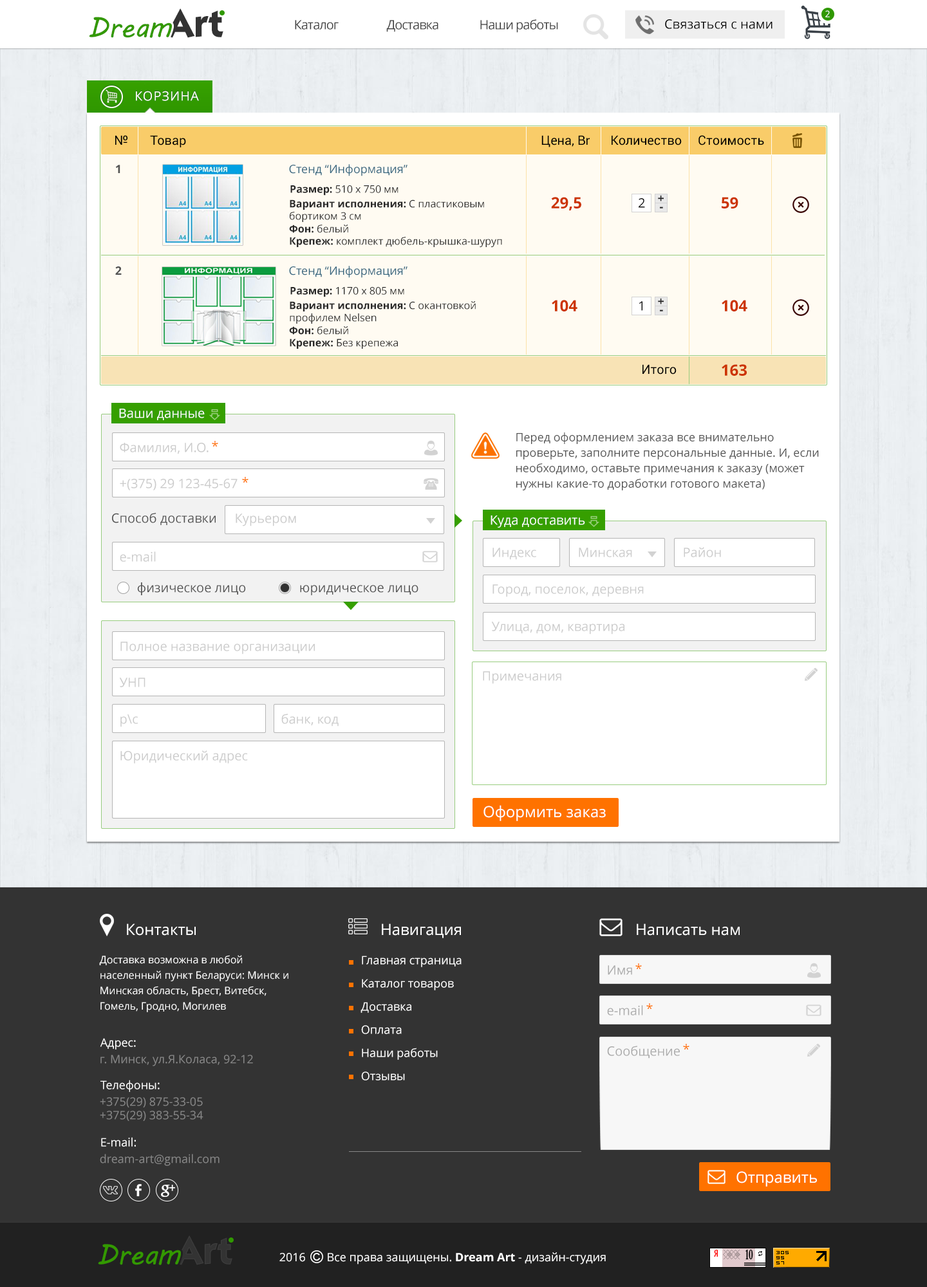
<style>
.page{position:relative;width:927px;height:1287px;background:#ffffff}
.page>*{position:absolute;margin:0}
.t1{font:29px "MVBoli";color:#339900}
.t2{font:29px "MVBoli";letter-spacing:-0.05em;color:#339900}
.t3{font:38.6px "KabelCTT-MediumBold";letter-spacing:0.01em;color:#333333}
.t4{font:9px "OpenSans";color:#ffffff}
.t5{font:12.9px "OpenSans";letter-spacing:-0.05em;color:#3f3f3f}
.t6{font:12.9px "OpenSans";color:#000000}
.t7{font:12.9px "OpenSans";letter-spacing:0.05em;color:#ffffff}
.t8{font:12.9px "Roboto-Regular";color:#000000}
.t9{font:11.6px "OpenSans-Bold";color:#525252}
.t10{font:11.6px "OpenSans";color:#33647e}
.t11{font:10.3px "OpenSans";color:#282828}
.t12{font:10.3px "OpenSans-Bold";color:#282828}
.t13{font:15.4px "OpenSans-Bold";color:#cc3300}
.t14{font:11.6px "OpenSans-Bold";letter-spacing:-0.01em;color:#282828}
.t15{font:12.9px "OpenSans";color:#ffffff}
.t16{font:11.6px/15.4px "OpenSans";color:#525252}
.t17{font:12.9px "OpenSans";color:#cbcbcb}
.t18{font:12.9px "OpenSans";color:#ff7200}
.t19{font:12.9px "OpenSans";color:#525252}
.t20{font:15.4px "OpenSans";color:#ffffff}
.t21{font:10.3px/15.4px "OpenSans";color:#ffffff}
.t22{font:11.6px/23.2px "OpenSans";color:#ffffff}
.t23{font:12.9px "OpenSans";color:#ababab}
.t24{font:11.6px "OpenSans";color:#ffffff}
.t25{font:11.6px "OpenSans";color:#878787}
.t26{font:11.6px "OpenSans-Bold";color:#ffffff}
</style>
<div class="page">
<p class="t1" style="left:89px;top:17px;width:83px;height:21px">Dre<span class="t2">am</span></p>
<p class="t3" style="left:165px;top:8px;width:58px;height:30px">Art</p>
<p class="t4" style="left:825px;top:10px;width:4px;height:7px">2</p>
<p class="t5" style="left:295px;top:19px;width:263px;height:14px">Каталог    Доставка  Наши работы</p>
<p class="t6" style="left:665px;top:19px;width:107px;height:10px">Связаться с нами</p>
<p class="t7" style="left:136px;top:91px;width:63px;height:10px">КОРЗИНА</p>
<p class="t8" style="left:115px;top:135px;width:649px;height:12px">№      Товар                   Цена, Br     Количество     Стоимость</p>
<p class="t9" style="left:116px;top:165px;width:4px;height:8px">1</p>
<p class="t10" style="left:289px;top:164px;width:118px;height:12px">Стенд “Информация”</p>
<p class="t11" style="left:290px;top:185px;width:108px;height:11px"><span class="t12">Размер:</span> 510 х 750 мм</p>
<p class="t13" style="left:551px;top:197px;width:30px;height:13px">29,5</p>
<p class="t14" style="left:658px;top:195px;width:5px;height:6px">+</p>
<p class="t13" style="left:721px;top:197px;width:17px;height:11px">59</p>
<p class="t11" style="left:290px;top:199px;width:194px;height:23px"><span class="t12">Вариант исполнения:</span> С пластиковым бортиком 3 см</p>
<p class="t6" style="left:638px;top:198px;width:7px;height:10px">2</p>
<p class="t14" style="left:660px;top:207px;width:3px;height:1px">-</p>
<p class="t11" style="left:289px;top:225px;width:59px;height:8px"><span class="t12">Фон:</span> белый</p>
<p class="t11" style="left:290px;top:237px;width:212px;height:10px"><span class="t12">Крепеж:</span> комплект дюбель-крышка-шуруп</p>
<p class="t9" style="left:115px;top:266px;width:7px;height:9px">2</p>
<p class="t10" style="left:289px;top:266px;width:118px;height:12px">Стенд “Информация”</p>
<p class="t11" style="left:290px;top:287px;width:114px;height:10px"><span class="t12">Размер:</span> 1170 х 805 мм</p>
<p class="t11" style="left:290px;top:301px;width:186px;height:23px"><span class="t12">Вариант исполнения:</span> С окантовкой профилем Nelsen</p>
<p class="t13" style="left:551px;top:300px;width:26px;height:11px">104</p>
<p class="t6" style="left:638px;top:301px;width:4px;height:10px">1</p>
<p class="t14" style="left:658px;top:298px;width:5px;height:6px">+</p>
<p class="t13" style="left:721px;top:300px;width:26px;height:11px">104</p>
<p class="t14" style="left:660px;top:310px;width:3px;height:1px">-</p>
<p class="t11" style="left:289px;top:326px;width:59px;height:9px"><span class="t12">Фон:</span> белый</p>
<p class="t11" style="left:290px;top:338px;width:108px;height:11px"><span class="t12">Крепеж:</span> Без крепежа</p>
<p class="t8" style="left:642px;top:364px;width:34px;height:10px">Итого</p>
<p class="t13" style="left:721px;top:364px;width:25px;height:12px">163</p>
<p class="t15" style="left:119px;top:409px;width:86px;height:11px">Ваши данные</p>
<p class="t16" style="left:516px;top:432px;width:302px;height:58px">Перед оформлением заказа все внимательно проверьте, заполните персональные данные. И, если необходимо, оставьте примечания к заказу (может нужны какие-то доработки готового макета)</p>
<p class="t17" style="left:120px;top:443px;width:88px;height:11px">Фамилия, И.О.</p>
<p class="t18" style="left:212px;top:441px;width:6px;height:6px">*</p>
<p class="t17" style="left:120px;top:479px;width:117px;height:11px">+(375) 29 123-45-67</p>
<p class="t18" style="left:242px;top:477px;width:6px;height:6px">*</p>
<p class="t19" style="left:112px;top:513px;width:104px;height:12px">Способ доставки</p>
<p class="t17" style="left:236px;top:513px;width:60px;height:13px">Курьером</p>
<p class="t15" style="left:490px;top:515px;width:95px;height:13px">Куда доставить</p>
<p class="t17" style="left:120px;top:551px;width:36px;height:11px">e-mail</p>
<p class="t17" style="left:492px;top:548px;width:44px;height:12px">Индекс</p>
<p class="t17" style="left:578px;top:548px;width:54px;height:9px">Минская</p>
<p class="t17" style="left:683px;top:547px;width:38px;height:10px">Район</p>
<p class="t19" style="left:137px;top:582px;width:281px;height:13px">физическое лицо   юридическое лицо</p>
<p class="t17" style="left:492px;top:584px;width:151px;height:13px">Город, поселок, деревня</p>
<p class="t17" style="left:491px;top:622px;width:133px;height:12px">Улица, дом, квартира</p>
<p class="t17" style="left:120px;top:642px;width:195px;height:12px">Полное название организации</p>
<p class="t17" style="left:119px;top:678px;width:26px;height:9px">УНП</p>
<p class="t17" style="left:483px;top:671px;width:78px;height:13px">Примечания</p>
<p class="t17" style="left:281px;top:714px;width:57px;height:12px">банк, код</p>
<p class="t17" style="left:120px;top:714px;width:18px;height:13px">р\с</p>
<p class="t17" style="left:120px;top:750px;width:128px;height:14px">Юридический адрес</p>
<p class="t20" style="left:483px;top:805px;width:122px;height:16px">Оформить заказ</p>
<p class="t20" style="left:127px;top:923px;width:69px;height:13px">Контакты</p>
<p class="t20" style="left:382px;top:923px;width:79px;height:15px">Навигация</p>
<p class="t20" style="left:636px;top:923px;width:103px;height:13px">Написать нам</p>
<p class="t21" style="left:99px;top:955px;width:189px;height:57px">Доставка возможна в любой населенный пункт Беларуси: Минск и Минская область, Брест, Витебск, Гомель, Гродно, Могилев</p>
<p class="t22" style="left:360px;top:956px;width:101px;height:124px">Главная страница<br>Каталог товаров<br>Доставка<br>Оплата<br>Наши работы<br>Отзывы</p>
<p class="t23" style="left:607px;top:965px;width:25px;height:10px">Имя</p>
<p class="t18" style="left:635px;top:963px;width:7px;height:7px">*</p>
<p class="t23" style="left:607px;top:1005px;width:36px;height:10px">e-mail</p>
<p class="t18" style="left:646px;top:1003px;width:6px;height:7px">*</p>
<p class="t24" style="left:100px;top:1038px;width:36px;height:11px">Адрес:</p>
<p class="t23" style="left:607px;top:1046px;width:72px;height:12px">Сообщение</p>
<p class="t18" style="left:683px;top:1044px;width:6px;height:6px">*</p>
<p class="t25" style="left:100px;top:1055px;width:153px;height:11px">г. Минск, ул.Я.Коласа, 92-12</p>
<p class="t24" style="left:100px;top:1080px;width:60px;height:12px">Телефоны:</p>
<p class="t25" style="left:100px;top:1097px;width:103px;height:10px">+375(29) 875-33-05</p>
<p class="t25" style="left:100px;top:1111px;width:103px;height:10px">+375(29) 383-55-34</p>
<p class="t24" style="left:101px;top:1137px;width:35px;height:10px">E-mail:</p>
<p class="t25" style="left:100px;top:1154px;width:119px;height:12px">dream-art@gmail.com</p>
<p class="t20" style="left:736px;top:1171px;width:81px;height:16px">Отправить</p>
<p class="t3" style="left:174px;top:1235px;width:58px;height:30px">Art</p>
<p class="t1" style="left:98px;top:1244px;width:83px;height:21px">Dre<span class="t2">am</span></p>
<p class="t24" style="left:279px;top:1252px;width:326px;height:12px">2016       Все права защищены. <span class="t26">Dream Art</span> - дизайн-студия</p>
</div>
